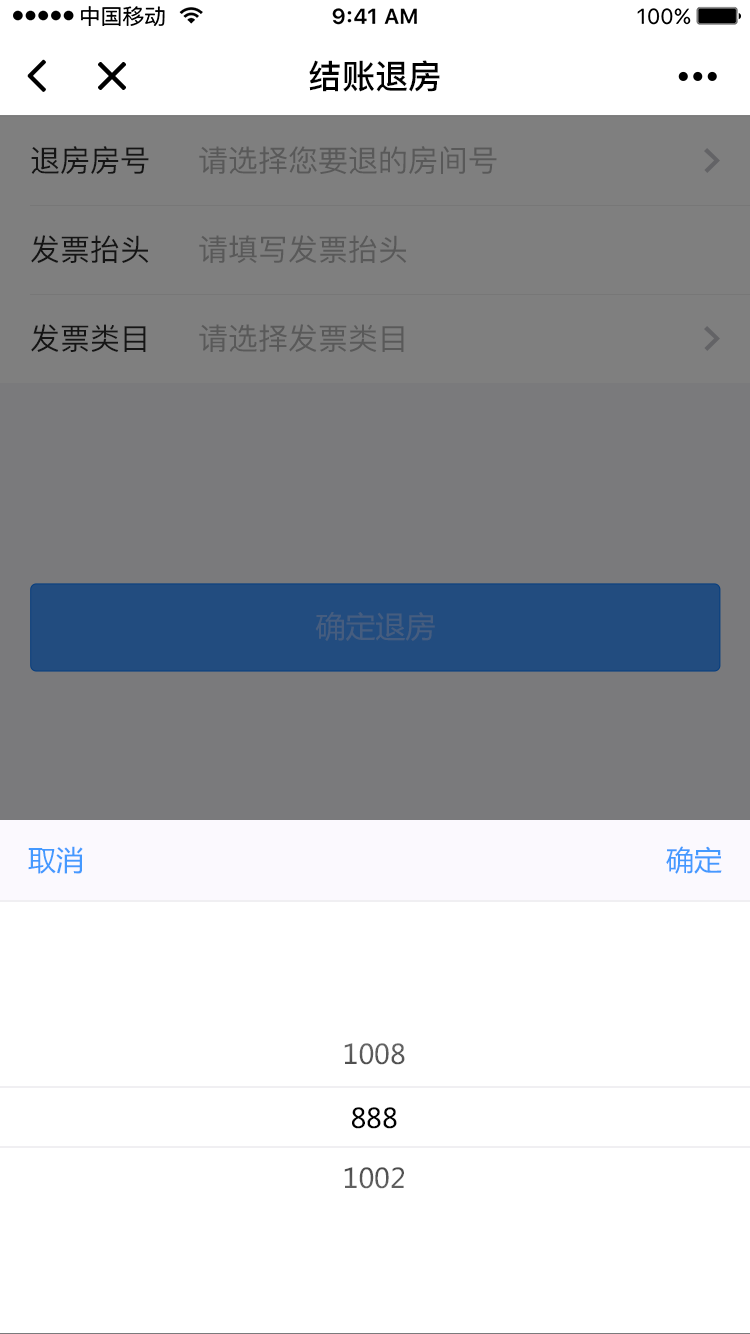
<style>
.page{position:relative;width:750px;height:1334px;background:#ffffff}
.page>*{position:absolute;margin:0}
.t1{font:33.2px "PingFang-SC-Bold";color:#000000}
.t2{font:30px "PingFang-SC-Medium";color:#2b2b2b}
.t3{font:30px "PingFang-SC-Medium";color:#595959}
.t4{font:30px "MicrosoftYaHei";color:#465d7f}
.t5{font:28px "MicrosoftYaHei";color:#4499ff}
.t6{font:27px "MicrosoftYaHei";color:#5a5a5a}
.t7{font:27px "MicrosoftYaHei";color:#000000}
.t8{font:27px "MicrosoftYaHei";color:#585858}
</style>
<div class="page">
<p class="t1" style="left:309px;top:60px;width:131px;height:32px">结账退房</p>
<p class="t2" style="left:31px;top:146px;width:118px;height:28px">退房房号</p>
<p class="t3" style="left:199px;top:146px;width:298px;height:29px">请选择您要退的房间号</p>
<p class="t2" style="left:31px;top:235px;width:118px;height:28px">发票抬头</p>
<p class="t3" style="left:199px;top:235px;width:208px;height:28px">请填写发票抬头</p>
<p class="t2" style="left:31px;top:324px;width:115px;height:28px">发票类目</p>
<p class="t3" style="left:199px;top:324px;width:205px;height:28px">请选择发票类目</p>
<p class="t4" style="left:315px;top:612px;width:120px;height:29px">确定退房</p>
<p class="t5" style="left:28px;top:846px;width:55px;height:28px">取消</p>
<p class="t5" style="left:666px;top:846px;width:56px;height:28px">确定</p>
<p class="t6" style="left:344px;top:1043px;width:61px;height:22px">1008</p>
<p class="t7" style="left:352px;top:1107px;width:45px;height:22px">888</p>
<p class="t8" style="left:344px;top:1167px;width:60px;height:22px">1002</p>
</div>
